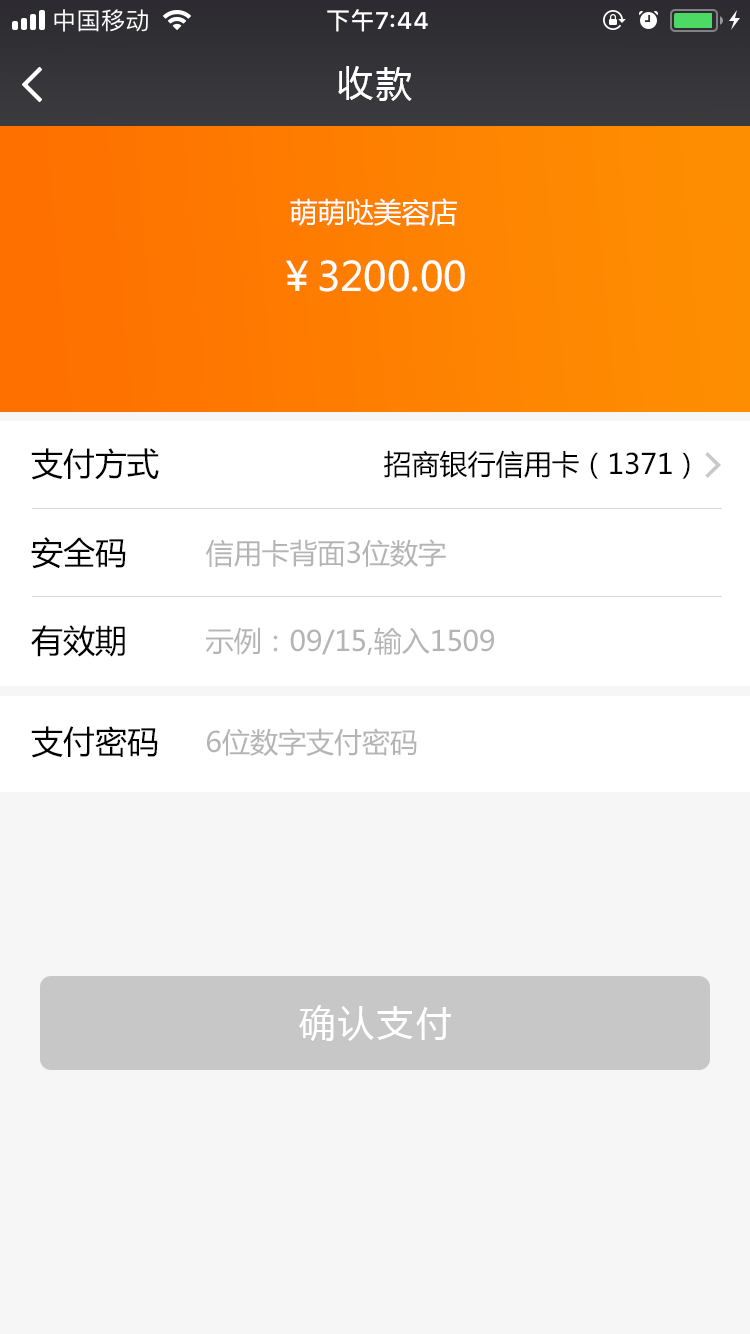
<style>
.page{position:relative;width:750px;height:1334px;background:#f6f6f6}
.page>*{position:absolute;margin:0}
.t1{font:36px "MicrosoftYaHei";letter-spacing:0.08em;color:#ffffff}
.t2{font:28px "MicrosoftYaHei";color:#ffffff}
.t3{font:40px "MicrosoftYaHei";color:#ffffff}
.t4{font:32px "MicrosoftYaHei";color:#000000}
.t5{font:28px "MicrosoftYaHei";color:#000000}
.t6{font:28px "MicrosoftYaHei";color:#b4b4b4}
</style>
<div class="page">
<p class="t1" style="left:338px;top:66px;width:74px;height:35px">收款</p>
<p class="t2" style="left:290px;top:198px;width:167px;height:28px">萌萌哒美容店</p>
<p class="t3" style="left:286px;top:260px;width:179px;height:32px">￥3200.00</p>
<p class="t4" style="left:31px;top:448px;width:128px;height:32px">支付方式</p>
<p class="t5" style="left:384px;top:450px;width:306px;height:29px">招商银行信用卡（1371）</p>
<p class="t4" style="left:31px;top:537px;width:95px;height:32px">安全码</p>
<p class="t6" style="left:206px;top:539px;width:240px;height:28px">信用卡背面3位数字</p>
<p class="t4" style="left:31px;top:625px;width:94px;height:32px">有效期</p>
<p class="t6" style="left:206px;top:627px;width:288px;height:28px">示例：09/15,输入1509</p>
<p class="t4" style="left:31px;top:726px;width:127px;height:32px">支付密码</p>
<p class="t6" style="left:207px;top:728px;width:210px;height:28px">6位数字支付密码</p>
<p class="t1" style="left:299px;top:1005px;width:152px;height:36px">确认支付</p>
</div>
